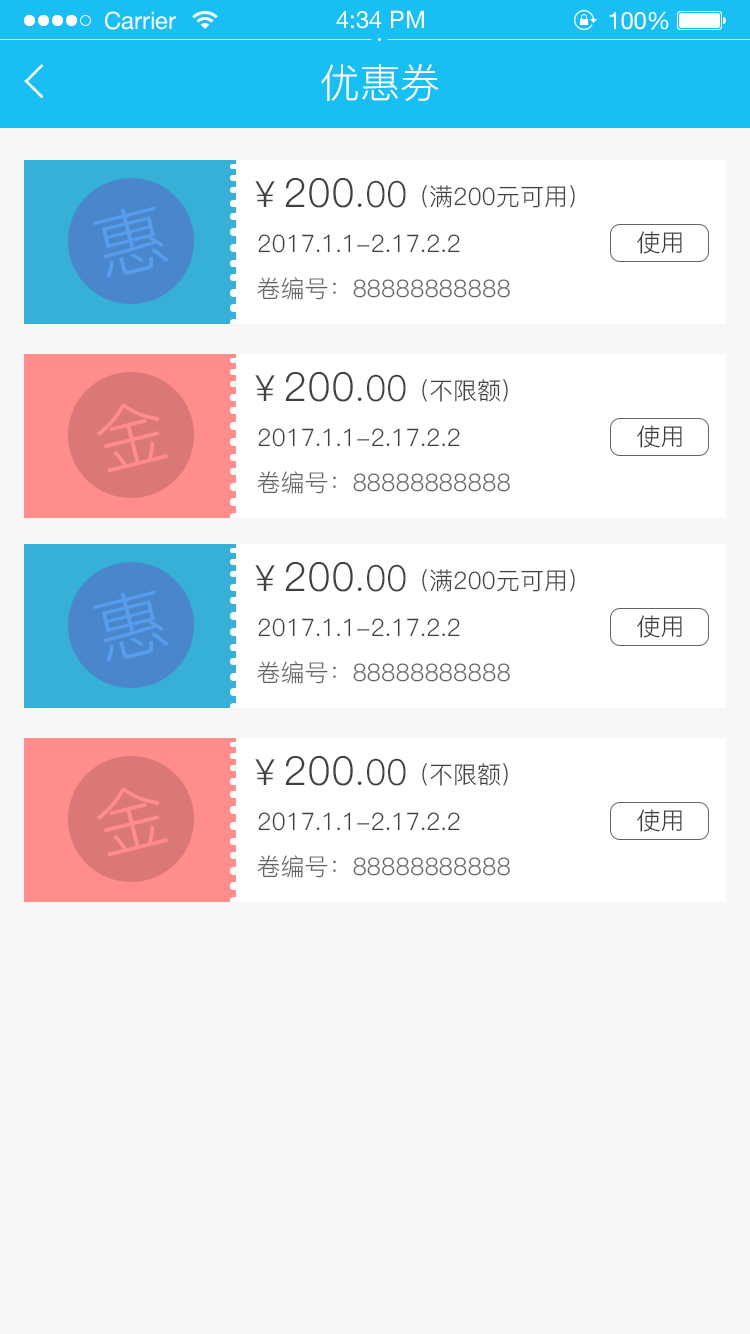
<style>
.page{position:relative;width:750px;height:1334px;background:#f7f7f7}
.page>*{position:absolute;margin:0}
.t1{font:40px "PingFang-SC-Regular";color:#ffffff}
.t2{font:40px "PingFang-SC-Regular";color:#3f4144}
.t3{font:36px "PingFang-SC-Regular";color:#3f4144}
.t4{font:24px "PingFang-SC-Regular";color:#3f4144}
.t5{font:72px "PingFang-SC-Regular";color:#569dee}
.t6{font:24px "PingFang-SC-Regular";color:#3b3b3b}
.t7{font:24px "PingFang-SC-Regular";color:#626262}
.t8{font:72px "PingFang-SC-Regular";color:#ff8d8c}
</style>
<div class="page">
<p class="t1" style="left:321px;top:64px;width:118px;height:37px">优惠券</p>
<p class="t2" style="left:255px;top:178px;width:151px;height:30px"><span class="t3">￥</span>200<span class="t3">.00</span></p>
<p class="t4" style="left:422px;top:185px;width:153px;height:23px">（满200元可用）</p>
<p class="t5" style="left:93px;top:206px;width:76px;height:72px;rotate:-14deg">惠</p>
<p class="t6" style="left:637px;top:231px;width:45px;height:23px">使用</p>
<p class="t4" style="left:258px;top:234px;width:202px;height:19px">2017.1.1-2.17.2.2</p>
<p class="t7" style="left:257px;top:277px;width:253px;height:23px">卷编号：88888888888</p>
<p class="t2" style="left:255px;top:372px;width:151px;height:30px"><span class="t3">￥</span>200<span class="t3">.00</span></p>
<p class="t4" style="left:422px;top:379px;width:86px;height:23px">（不限额）</p>
<p class="t8" style="left:97px;top:403px;width:71px;height:70px;rotate:-14deg">金</p>
<p class="t6" style="left:637px;top:425px;width:45px;height:23px">使用</p>
<p class="t4" style="left:258px;top:428px;width:202px;height:19px">2017.1.1-2.17.2.2</p>
<p class="t7" style="left:257px;top:471px;width:253px;height:23px">卷编号：88888888888</p>
<p class="t2" style="left:255px;top:562px;width:151px;height:30px"><span class="t3">￥</span>200<span class="t3">.00</span></p>
<p class="t4" style="left:422px;top:569px;width:153px;height:23px">（满200元可用）</p>
<p class="t5" style="left:93px;top:590px;width:76px;height:72px;rotate:-14deg">惠</p>
<p class="t6" style="left:637px;top:615px;width:45px;height:23px">使用</p>
<p class="t4" style="left:258px;top:618px;width:202px;height:19px">2017.1.1-2.17.2.2</p>
<p class="t7" style="left:257px;top:661px;width:253px;height:23px">卷编号：88888888888</p>
<p class="t2" style="left:255px;top:756px;width:151px;height:30px"><span class="t3">￥</span>200<span class="t3">.00</span></p>
<p class="t4" style="left:422px;top:763px;width:86px;height:23px">（不限额）</p>
<p class="t8" style="left:97px;top:787px;width:71px;height:70px;rotate:-14deg">金</p>
<p class="t6" style="left:637px;top:809px;width:45px;height:23px">使用</p>
<p class="t4" style="left:258px;top:812px;width:202px;height:19px">2017.1.1-2.17.2.2</p>
<p class="t7" style="left:257px;top:855px;width:253px;height:23px">卷编号：88888888888</p>
</div>
